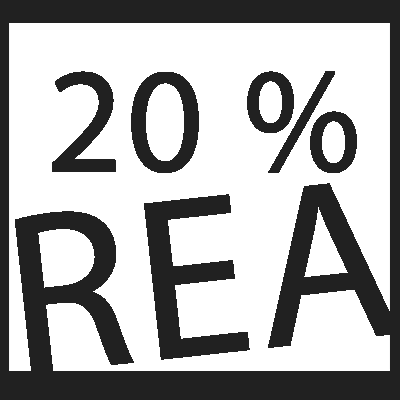
<style>
.page{position:relative;width:400px;height:400px;background:#ffffff}
.page>*{position:absolute;margin:0}
.t1{font:150.4px "MyriadPro-Regular";color:#212121;font-weight:bold}
.t2{font:230.4px "MyriadPro-Regular";color:#212121;font-weight:bold}
</style>
<div class="page">
<p class="t1" style="left:52px;top:71px;width:305px;height:102px">20 %</p>
<p class="t2" style="left:15px;top:183px;width:384px;height:191px;rotate:-6deg">REA</p>
</div>
